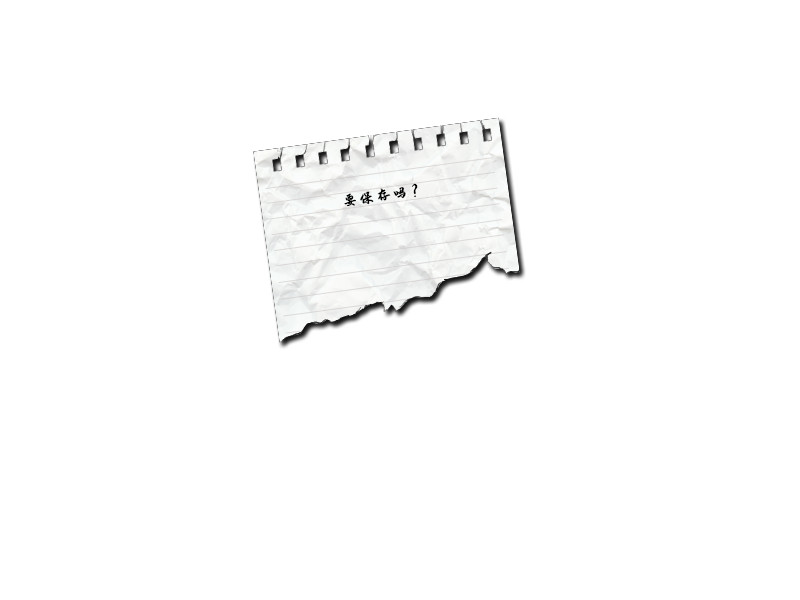
<style>
.page{position:relative;width:800px;height:600px;background:#ffffff}
.page>*{position:absolute;margin:0}
.t1{font:18.8px "slideyouran-Regular";color:#000000}
</style>
<div class="page">
<p class="t1" style="left:344px;top:183px;width:74px;height:23px;rotate:-8deg">要保存吗?</p>
</div>
